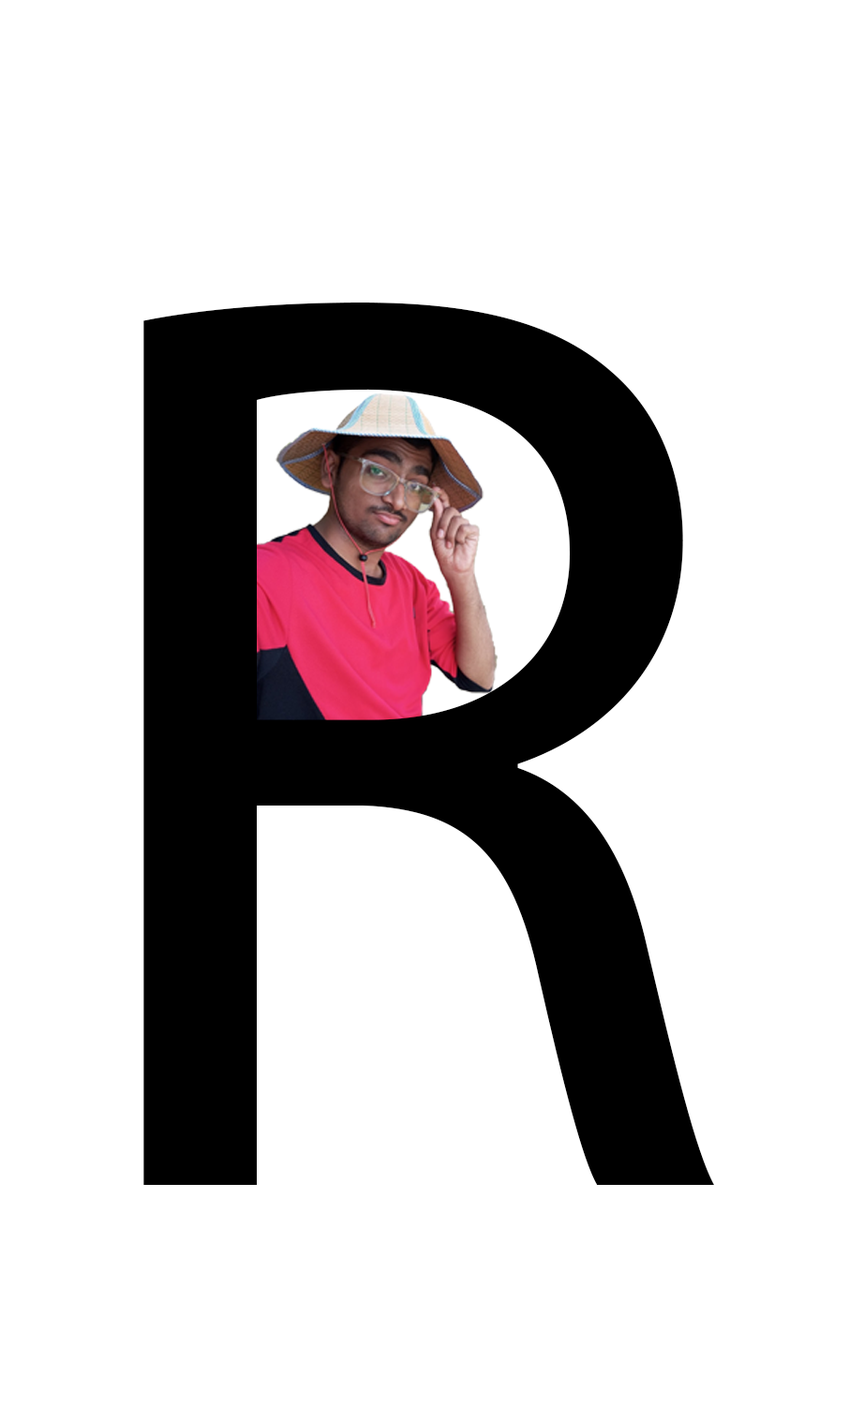
<style>
.page{position:relative;width:849px;height:1405px;background:#ffffff}
.page>*{position:absolute;margin:0}
.t1{font:1298.8px "MyriadPro-Regular";color:#000000}
</style>
<div class="page">
<p class="t1" style="left:143px;top:303px;width:571px;height:882px">R</p>
</div>
